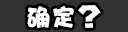
<style>
.page{position:relative;width:128px;height:32px;background:#333333}
.page>*{position:absolute;margin:0}
.t1{font:24px "DFPHaiBaoW12";letter-spacing:0.05em;color:#ffffff}
.t2{font:37px "MarioKartPositionFontRegular";letter-spacing:0.05em;color:#ffffff;scale:0.97 1}
</style>
<div class="page">
<p class="t1" style="left:27px;top:6px;width:47px;height:22px">确定</p>
<p class="t2" style="left:78px;top:5px;width:23px;height:23px">?</p>
</div>
